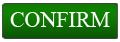
<style>
.page{position:relative;width:120px;height:42px;background:#ffffff}
.page>*{position:absolute;margin:0}
.t1{font:22px "TimesNewRomanPSMT";color:#ffffff}
</style>
<div class="page">
<p class="t1" style="left:10px;top:12px;width:100px;height:15px">CONFIRM</p>
</div>
